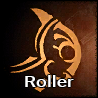
<style>
.page{position:relative;width:98px;height:98px}
.page>*{position:absolute;margin:0}
.t1{font:16px "Roboto-Medium";color:#ffffff;scale:1.2 1}
</style>
<div class="page">
<p class="t1" style="left:25px;top:75px;width:49px;height:12px">Roller</p>
</div>
